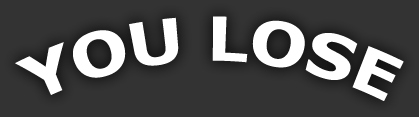
<style>
.page{position:relative;width:419px;height:117px;background:#333333}
.page>*{position:absolute;margin:0}
.t1{font:60px "Verdana-Bold";color:#ffffff}
</style>
<div class="page">
<p class="t1" style="left:15px;top:16px;width:389px;height:85px">YOU LOSE</p>
</div>
